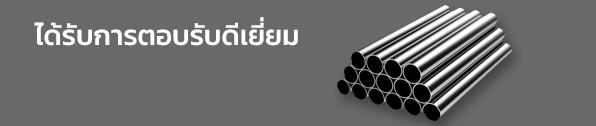
<style>
.page{position:relative;width:596px;height:126px;background:#696969}
.page>*{position:absolute;margin:0}
.t1{font:28px "Kanit-Medium";color:#ffffff}
</style>
<div class="page">
<p class="t1" style="left:34px;top:17px;width:264px;height:29px">ได้รับการตอบรับดีเยี่ยม</p>
</div>
